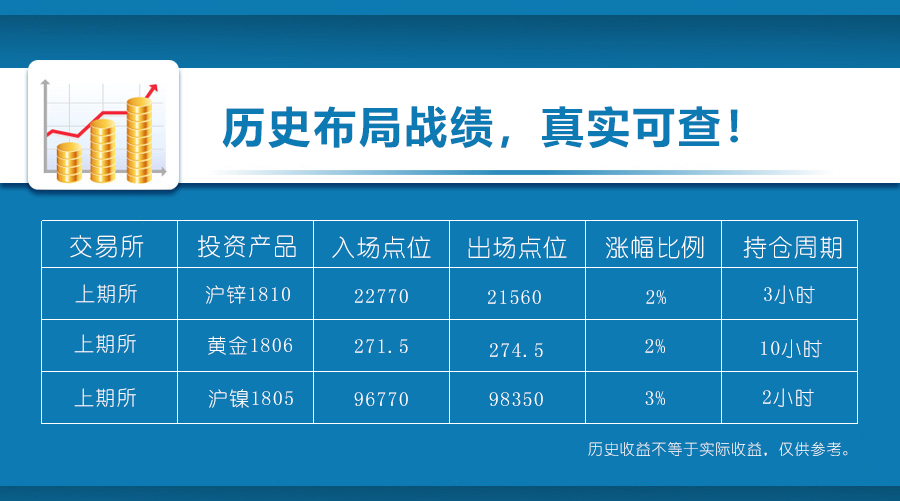
<style>
.page{position:relative;width:900px;height:501px;background:#0d7ab3}
.page>*{position:absolute;margin:0}
.t1{font:43px "MicrosoftYaHei-Bold";letter-spacing:0.06em;color:#0d7ab3}
.t2{font:24px "YouYuan";letter-spacing:0.06em;color:#ffffff}
.t3{font:20px "YouYuan";letter-spacing:0.06em;color:#ffffff}
.t4{font:15px "YouYuan";letter-spacing:0.06em;color:#ffffff}
</style>
<div class="page">
<p class="t1" style="left:222px;top:106px;width:516px;height:43px">历史布局战绩，真实可查！</p>
<p class="t2" style="left:70px;top:235px;width:74px;height:23px">交易所</p>
<p class="t2" style="left:198px;top:234px;width:98px;height:24px">投资产品</p>
<p class="t2" style="left:332px;top:236px;width:99px;height:23px">入场点位</p>
<p class="t2" style="left:468px;top:236px;width:99px;height:23px">出场点位</p>
<p class="t2" style="left:606px;top:236px;width:98px;height:23px">涨幅比例</p>
<p class="t2" style="left:743px;top:236px;width:99px;height:23px">持仓周期</p>
<p class="t3" style="left:75px;top:284px;width:62px;height:19px">上期所</p>
<p class="t3" style="left:205px;top:285px;width:85px;height:19px">沪锌1810</p>
<p class="t3" style="left:355px;top:289px;width:53px;height:14px">22770</p>
<p class="t3" style="left:488px;top:290px;width:53px;height:14px">21560</p>
<p class="t3" style="left:646px;top:290px;width:20px;height:14px">2%</p>
<p class="t3" style="left:764px;top:285px;width:51px;height:19px">3小时</p>
<p class="t3" style="left:74px;top:334px;width:62px;height:19px">上期所</p>
<p class="t3" style="left:208px;top:336px;width:84px;height:19px">黄金1806</p>
<p class="t3" style="left:355px;top:339px;width:53px;height:14px">271.5</p>
<p class="t3" style="left:645px;top:339px;width:20px;height:14px">2%</p>
<p class="t3" style="left:761px;top:339px;width:61px;height:19px">10小时</p>
<p class="t3" style="left:490px;top:343px;width:53px;height:14px">274.5</p>
<p class="t3" style="left:74px;top:388px;width:62px;height:19px">上期所</p>
<p class="t3" style="left:208px;top:389px;width:85px;height:19px">沪镍1805</p>
<p class="t3" style="left:763px;top:388px;width:51px;height:19px">2小时</p>
<p class="t3" style="left:354px;top:392px;width:54px;height:14px">96770</p>
<p class="t3" style="left:489px;top:392px;width:54px;height:14px">98350</p>
<p class="t3" style="left:645px;top:391px;width:20px;height:14px">3%</p>
<p class="t4" style="left:588px;top:442px;width:260px;height:14px">历史收益不等于实际收益，仅供参考。</p>
</div>
